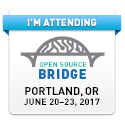
<style>
.page{position:relative;width:125px;height:125px;background:#ffffff}
.page>*{position:absolute;margin:0}
.t1{font:10px "DIN-Black";color:#ffffff}
.t2{font:7px "DIN-Bold";letter-spacing:0.02em;color:#08b9a6}
.t3{font:13px "DIN-Black";letter-spacing:0.06em;color:#116db6}
.t4{font:13px "DIN-Black";letter-spacing:0.02em;color:#116db6}
.t5{font:13px "DIN-Black";letter-spacing:0.03em;color:#116db6}
.t6{font:9px/10px "DIN-Bold";letter-spacing:0.02em;color:#000000}
.t7{font:11px/10px "DIN-Bold";color:#000000}
</style>
<div class="page">
<p class="t1" style="left:27px;top:18px;width:70px;height:8px">I’M ATTENDING</p>
<p class="t2" style="left:39px;top:62px;width:48px;height:5px">OPEN SOURCE</p>
<p class="t3" style="left:39px;top:69px;width:47px;height:10px"><span class="t4">B</span>RI<span class="t5">D</span><span class="t4">GE</span></p>
<p class="t6" style="left:24px;top:87px;width:76px;height:20px;text-align:center"><span class="t7">PORTLAND, OR<br></span>JUNE 20–23, 2017</p>
</div>
